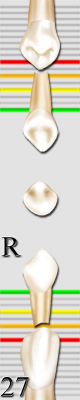
<style>
.page{position:relative;width:80px;height:400px;background:#e4e3e3}
.page>*{position:absolute;margin:0}
.t1{font:28.4px "TimesNewRomanPSMT";letter-spacing:0.005em;color:#000000}
.t2{font:28.4px "TimesNewRomanPSMT";letter-spacing:0.005em}
</style>
<div class="page">
<p class="t1" style="left:1px;top:237px;width:20px;height:19px">R</p>
<p class="t2" style="left:1px;top:377px;width:28px;height:20px">27</p>
</div>
